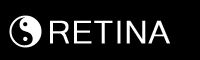
<style>
.page{position:relative;width:200px;height:60px;background:#000000}
.page>*{position:absolute;margin:0}
.t1{font:41.7px "Microsoft-Yi-Baiti";color:#ffffff;font-weight:bold}
</style>
<div class="page">
<p class="t1" style="left:50px;top:20px;width:120px;height:24px">RETINA</p>
</div>
